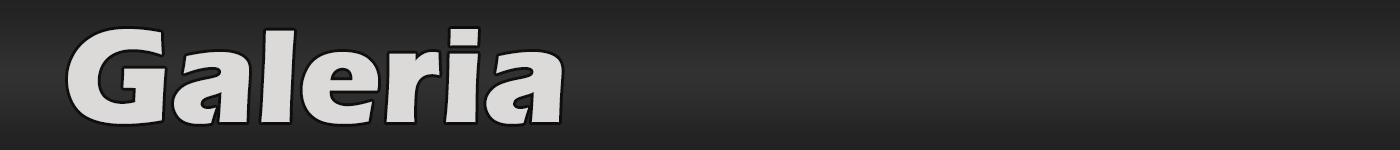
<style>
.page{position:relative;width:1400px;height:150px}
.page>*{position:absolute;margin:0}
.t1{font:136.8px "ErasITC-Bold";color:#dcd9d9}
</style>
<div class="page">
<p class="t1" style="left:68px;top:29px;width:494px;height:95px">Galeria</p>
</div>
